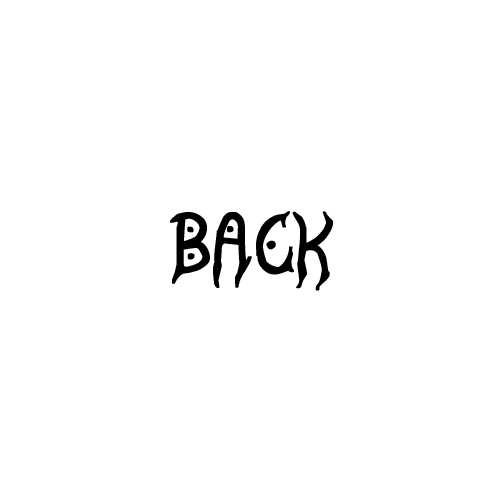
<style>
.page{position:relative;width:500px;height:500px;background:#ffffff}
.page>*{position:absolute;margin:0}
.t1{font:72px "SatanycDemoniacSt";color:#000000;font-weight:bold}
</style>
<div class="page">
<p class="t1" style="left:170px;top:211px;width:163px;height:80px">Back</p>
</div>
